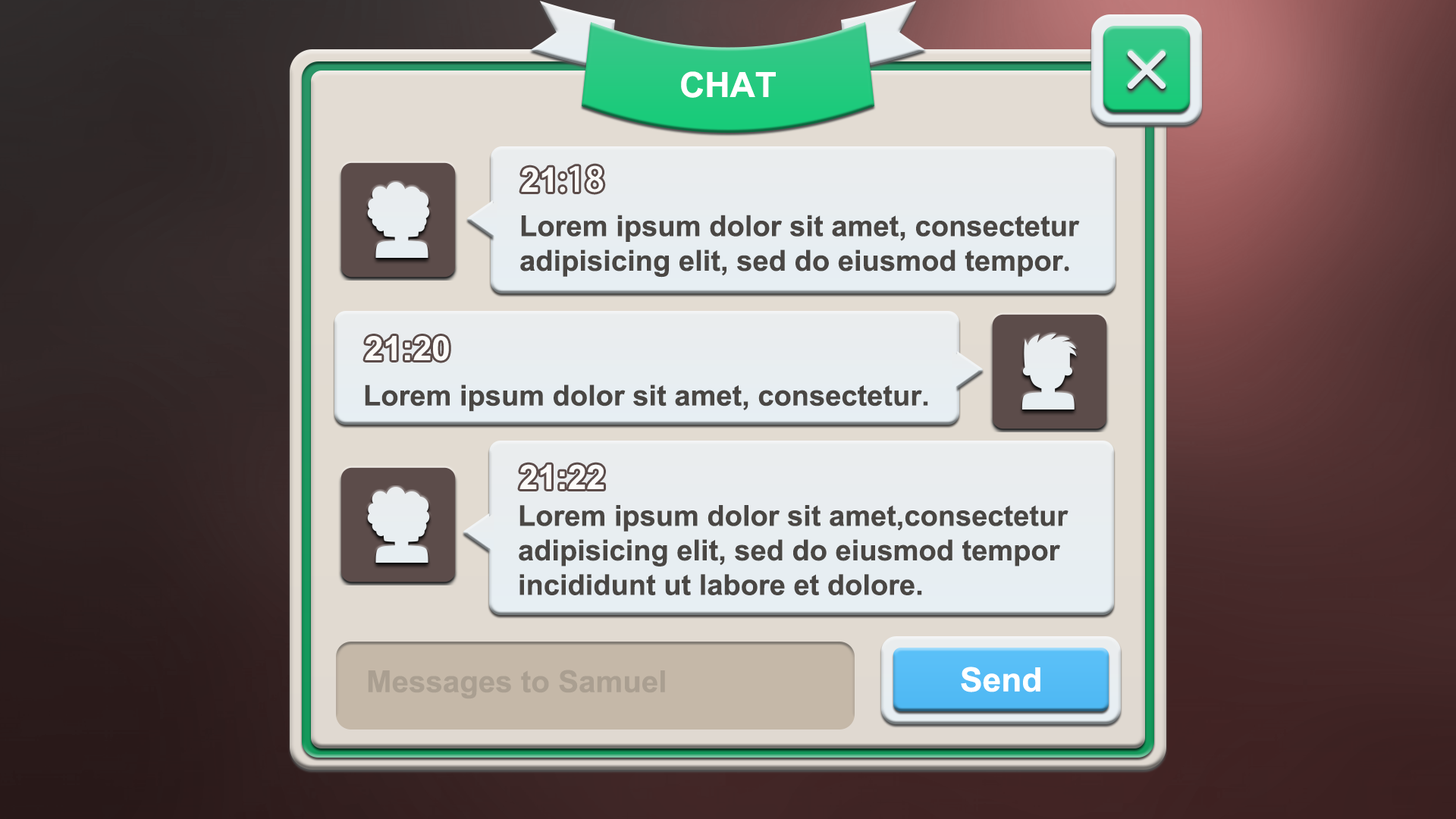
<style>
.page{position:relative;width:1456px;height:819px}
.page>*{position:absolute;margin:0}
.t1{font:34.9px "Arial-BoldMT";color:#ffffff}
.t2{font:33.6px "AdobeHeitiStd-Regular";color:#ffffff}
.t3{font:33.6px "Arial-BoldMT";color:#ffffff}
.t4{font:28.9px "Arial-BoldMT";color:#4a4744}
.t5{font:28.9px "AdobeHeitiStd-Regular";color:#4a4744}
.t6{font:33.3px "Arial-BoldMT";color:#ffffff}
.t7{font:28.7px "Arial-BoldMT";color:#4a4744}
.t8{font:28.8px "Arial-BoldMT";color:#4a4744}
.t9{font:30.3px "Arial-BoldMT";color:#aa9f91}
.t10{font:33.4px "Arial-BoldMT";color:#ffffff}
</style>
<div class="page">
<p class="t1" style="left:681px;top:71px;width:95px;height:27px">CHAT</p>
<p class="t2" style="left:521px;top:165px;width:83px;height:28px"><span class="t3">21</span>:18</p>
<p class="t4" style="left:520px;top:215px;width:560px;height:63px">Lorem ipsum dolor sit amet, consectetur <br>adipisicing elit, sed do eiusmod tempor<span class="t5">.</span></p>
<p class="t6" style="left:365px;top:336px;width:84px;height:25px">21:20</p>
<p class="t7" style="left:365px;top:384px;width:563px;height:28px">Lorem ipsum dolor sit amet, consectetur.</p>
<p class="t3" style="left:519px;top:464px;width:85px;height:25px">21:22</p>
<p class="t8" style="left:519px;top:505px;width:549px;height:90px">Lorem ipsum dolor sit amet,consectetur <br>adipisicing elit, sed do eiusmod tempor <br>incididunt ut labore et dolore.</p>
<p class="t9" style="left:368px;top:670px;width:297px;height:29px">Messages to Samuel</p>
<p class="t10" style="left:961px;top:667px;width:79px;height:25px">Send</p>
</div>
